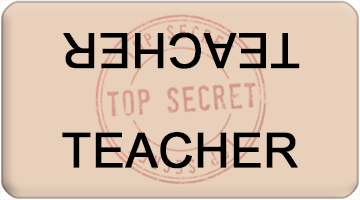
<style>
.page{position:relative;width:360px;height:200px;background:#e8d0bb}
.page>*{position:absolute;margin:0}
.t1{font:48px "ArialMT";color:#000000;font-weight:bold}
</style>
<div class="page">
<p class="t1" style="left:63px;top:32px;width:237px;height:37px;rotate:180deg">TEACHER</p>
<p class="t1" style="left:62px;top:132px;width:236px;height:37px">TEACHER</p>
</div>
